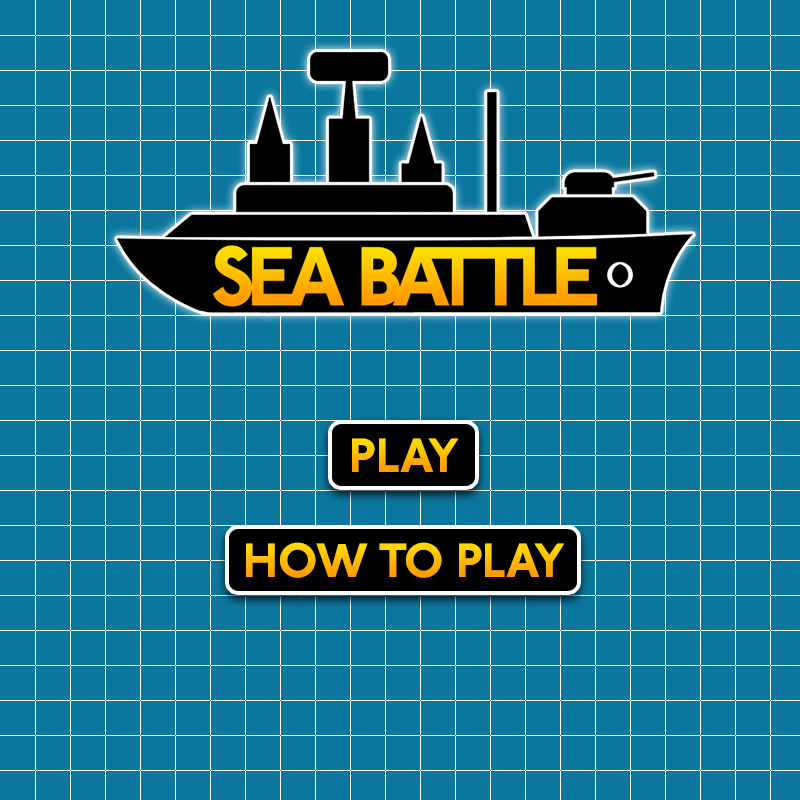
<style>
.page{position:relative;width:800px;height:800px;background:#0b779e}
.page>*{position:absolute;margin:0}
.t1{font:48px "P22UndergroundW01-Heavy"}
</style>
<div class="page">
<p class="t1" style="left:352px;top:438px;width:107px;height:34px">PLAY</p>
<p class="t1" style="left:246px;top:542px;width:319px;height:36px">HOW TO PLAY</p>
</div>
